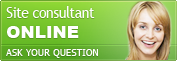
<style>
.page{position:relative;width:177px;height:61px}
.page>*{position:absolute;margin:0}
.t1{font:16px "TrebuchetMS";letter-spacing:-0.04em;color:#ffffff;scale:0.9 1}
.t2{font:17px "Arial-Black";color:#ffffff}
.t3{font:9.2px "Tahoma";letter-spacing:0.02em;color:#ffffff;text-transform:uppercase}
</style>
<div class="page">
<p class="t1" style="left:6px;top:6px;width:89px;height:12px">Site consultant</p>
<p class="t2" style="left:7px;top:26px;width:72px;height:12px">ONLINE</p>
<p class="t3" style="left:6px;top:49px;width:92px;height:9px">Ask your question</p>
</div>
